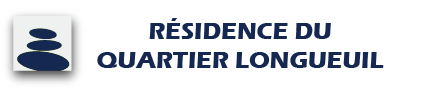
<style>
.page{position:relative;width:425px;height:93px;background:#ffffff}
.page>*{position:absolute;margin:0}
.t1{font:24px "ErasITC-Bold";color:#152851}
</style>
<div class="page">
<p class="t1" style="left:97px;top:18px;width:287px;height:50px;text-align:center">RÉSIDENCE DU<br>QUARTIER LONGUEUIL</p>
</div>
